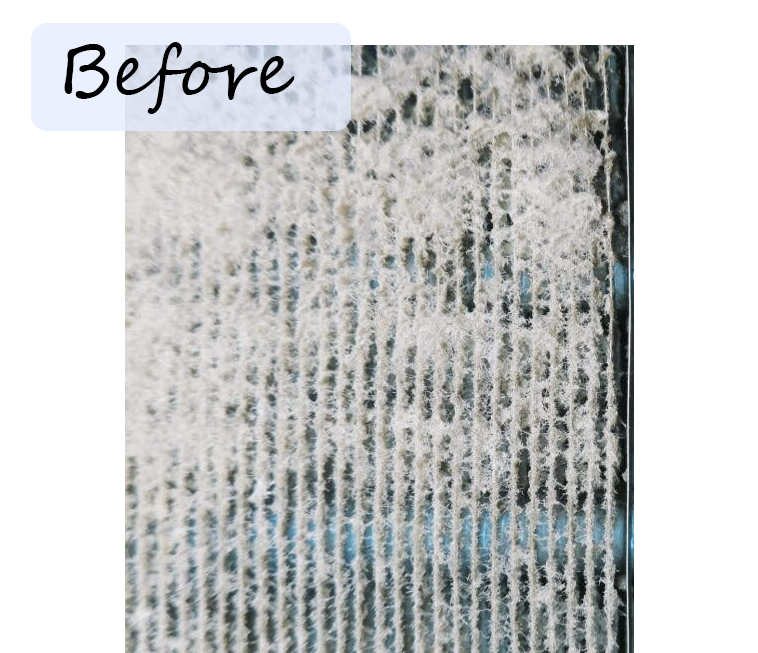
<style>
.page{position:relative;width:758px;height:653px;background:#ffffff}
.page>*{position:absolute;margin:0}
.t1{font:72px "SegoeScript";color:#000000}
</style>
<div class="page">
<p class="t1" style="left:64px;top:42px;width:231px;height:72px">Before</p>
</div>
